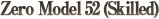
<style>
.page{position:relative;width:159px;height:19px;background:#ffffff}
.page>*{position:absolute;margin:0}
.t1{font:18px "RyuminPro-ExBold";letter-spacing:-0.08em;color:#4a3f32;font-weight:bold;scale:0.9 1}
</style>
<div class="page">
<p class="t1" style="left:0px;top:1px;width:159px;height:18px">Zero Model 52 (Skilled)</p>
</div>
